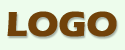
<style>
.page{position:relative;width:125px;height:50px;background:#edfcec}
.page>*{position:absolute;margin:0}
.t1{font:36px "ErasITC-Bold";color:#71420a}
</style>
<div class="page">
<p class="t1" style="left:7px;top:11px;width:110px;height:26px">LOGO</p>
</div>
